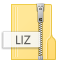
<style>
.page{position:relative;width:64px;height:64px;background:#ffffff}
.page>*{position:absolute;margin:0}
.t1{font:12px "SegoeUI";color:#64635e}
</style>
<div class="page">
<p class="t1" style="left:16px;top:35px;width:15px;height:10px">LIZ</p>
</div>
